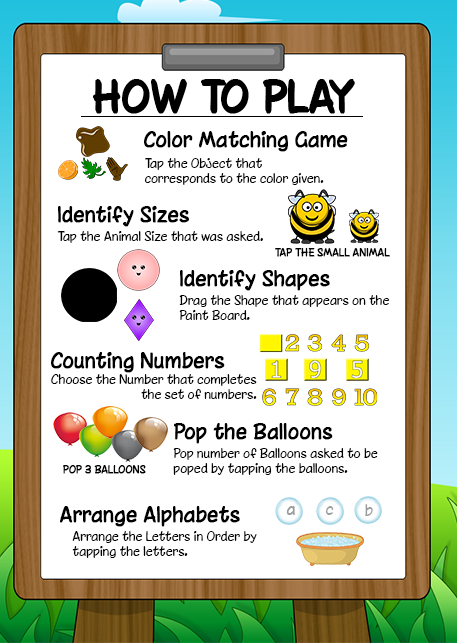
<style>
.page{position:relative;width:457px;height:643px;background:#ffffff}
.page>*{position:absolute;margin:0}
.t1{font:40px "Chinacat";color:#000000;font-weight:bold}
.t2{font:19.6px "Chinacat";color:#000000;font-weight:bold}
.t3{font:12.2px/14.7px "Chinacat";color:#000000}
.t4{font:12.2px "Chinacat";color:#000000}
.t5{font:10px "Chinacat";color:#000000;font-weight:bold}
.t6{font:15px "Chinacat";color:#9d9d9d}
.t7{font:15px "Chinacat";color:#9c9d9d}
</style>
<div class="page">
<p class="t1" style="left:93px;top:79px;width:261px;height:33px">HOW TO PLAY</p>
<p class="t2" style="left:144px;top:131px;width:204px;height:21px">Color Matching Game</p>
<p class="t3" style="left:144px;top:158px;width:180px;height:27px">Tap the Object that <br>corresponds to the color given.</p>
<p class="t2" style="left:58px;top:206px;width:131px;height:21px">Identify Sizes</p>
<p class="t4" style="left:57px;top:231px;width:206px;height:12px">Tap the Animal Size that was asked.</p>
<p class="t5" style="left:275px;top:248px;width:115px;height:9px">TAP THE SMALL ANIMAL</p>
<p class="t2" style="left:180px;top:270px;width:150px;height:21px">Identify Shapes</p>
<p class="t3" style="left:179px;top:295px;width:210px;height:25px">Drag the Shape that appears on the<br>Paint Board.</p>
<p class="t2" style="left:51px;top:352px;width:174px;height:21px">Counting Numbers</p>
<p class="t3" style="left:51px;top:374px;width:206px;height:25px;text-align:right">Choose the Number that completes<br>the set of numbers.</p>
<p class="t2" style="left:174px;top:423px;width:159px;height:21px">Pop the Balloons</p>
<p class="t3" style="left:173px;top:448px;width:205px;height:27px">Pop number of Balloons asked to be<br>poped by tapping the balloons.</p>
<p class="t5" style="left:63px;top:465px;width:83px;height:9px">POP 3 BALLOONS</p>
<p class="t2" style="left:60px;top:506px;width:180px;height:21px">Arrange Alphabets</p>
<p class="t6" style="left:286px;top:506px;width:9px;height:9px">a</p>
<p class="t6" style="left:286px;top:506px;width:9px;height:9px">a</p>
<p class="t7" style="left:325px;top:506px;width:9px;height:9px">c</p>
<p class="t7" style="left:365px;top:504px;width:8px;height:12px">b</p>
<p class="t3" style="left:72px;top:531px;width:185px;height:27px">Arrange the Letters in Order by<br>tapping the letters.</p>
</div>
